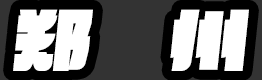
<style>
.page{position:relative;width:262px;height:80px;background:#ffffff}
.page>*{position:absolute;margin:0}
.t1{font:81.8px "zihunqijiyuzhouti_trial";letter-spacing:0.9em;color:#ffffff}
</style>
<div class="page">
<p class="t1" style="left:13px;top:9px;width:236px;height:62px">郑州</p>
</div>
